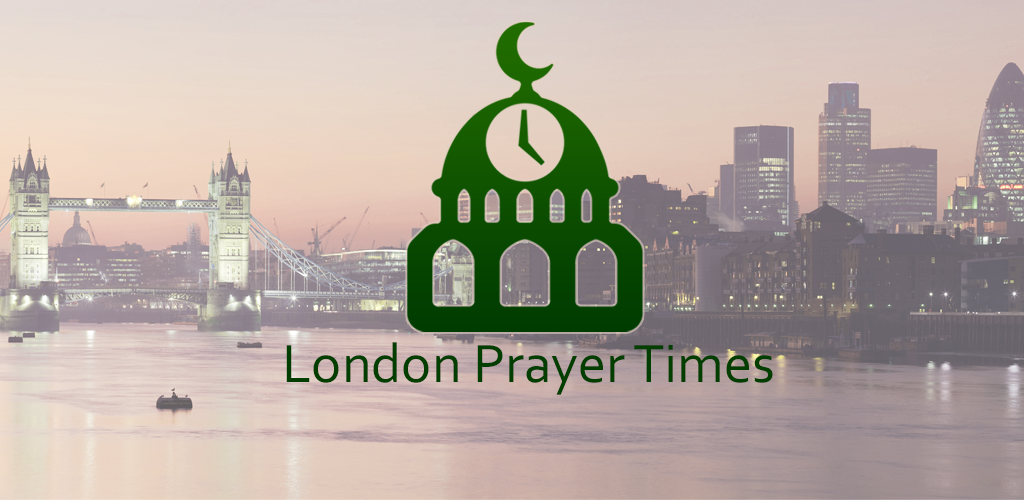
<style>
.page{position:relative;width:1024px;height:500px}
.page>*{position:absolute;margin:0}
.t1{font:56.1px "Corbel";color:#013e00}
</style>
<div class="page">
<p class="t1" style="left:286px;top:342px;width:487px;height:53px">London Prayer Times</p>
</div>
